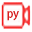
<style>
.page{position:relative;width:32px;height:32px;background:#ffffff}
.page>*{position:absolute;margin:0}
.t1{font:11.4px "AdobeHeitiStd-Regular";color:#d91f1f}
</style>
<div class="page">
<p class="t1" style="left:7px;top:11px;width:12px;height:10px">py</p>
</div>
